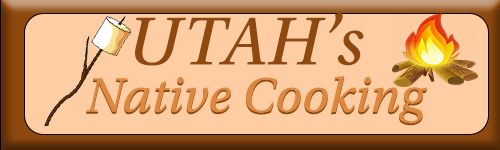
<style>
.page{position:relative;width:500px;height:150px;background:#ffcda3}
.page>*{position:absolute;margin:0}
.t1{font:72px "UtopiaStd-CaptIt";color:#8f480d}
.t2{font:51.4px "UtopiaStd-CaptIt";color:#de873f}
</style>
<div class="page">
<p class="t1" style="left:135px;top:12px;width:229px;height:54px">UTAH’s</p>
<p class="t2" style="left:86px;top:76px;width:341px;height:48px">Native Cooking</p>
</div>
